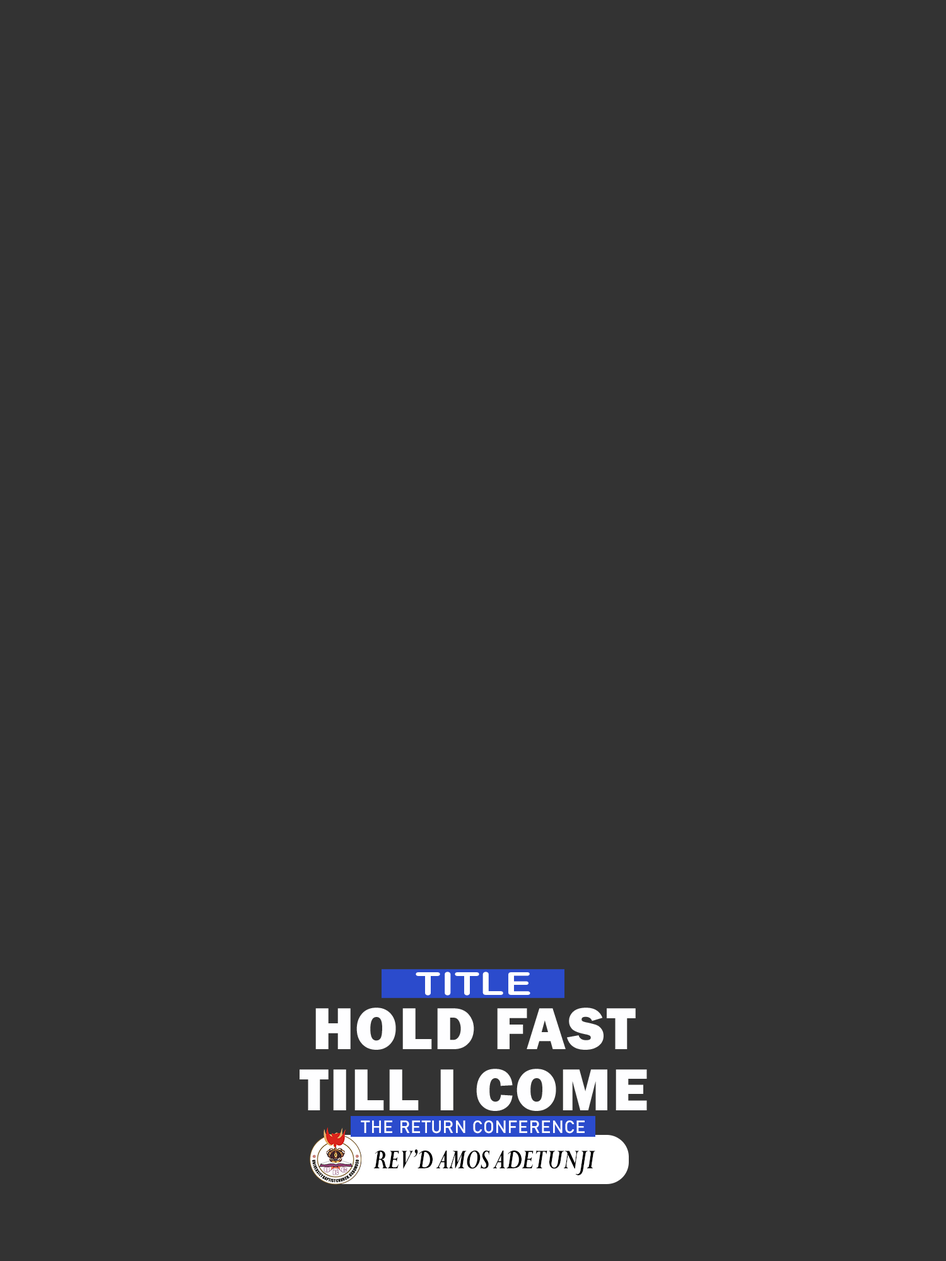
<style>
.page{position:relative;width:946px;height:1261px;background:#333333}
.page>*{position:absolute;margin:0}
.t1{font:31.7px "ArialRoundedMTBold";letter-spacing:0.025em;color:#fefeff;text-transform:uppercase;scale:1.24 1}
.t2{font:61.3px/61.3px "FranklinGothic-Heavy";letter-spacing:0.025em;color:#fefeff;text-transform:uppercase}
.t3{font:17.5px "Bahnschrift";letter-spacing:0.025em;color:#fefeff;text-transform:uppercase}
.t4{font:30.7px "Perpetua-BoldItalic";letter-spacing:-0.005em;color:#000000;text-transform:uppercase;scale:0.71 1}
</style>
<div class="page">
<p class="t1" style="left:415px;top:972px;width:115px;height:23px">Title</p>
<p class="t2" style="left:299px;top:1007px;width:348px;height:104px;text-align:center">HOLD FAST<br>TILL I COME</p>
<p class="t3" style="left:361px;top:1120px;width:223px;height:14px">THE RETURN CONFERENCE</p>
<p class="t4" style="left:373px;top:1149px;width:222px;height:26px">REV’D aMOS ADETUNJI</p>
</div>
